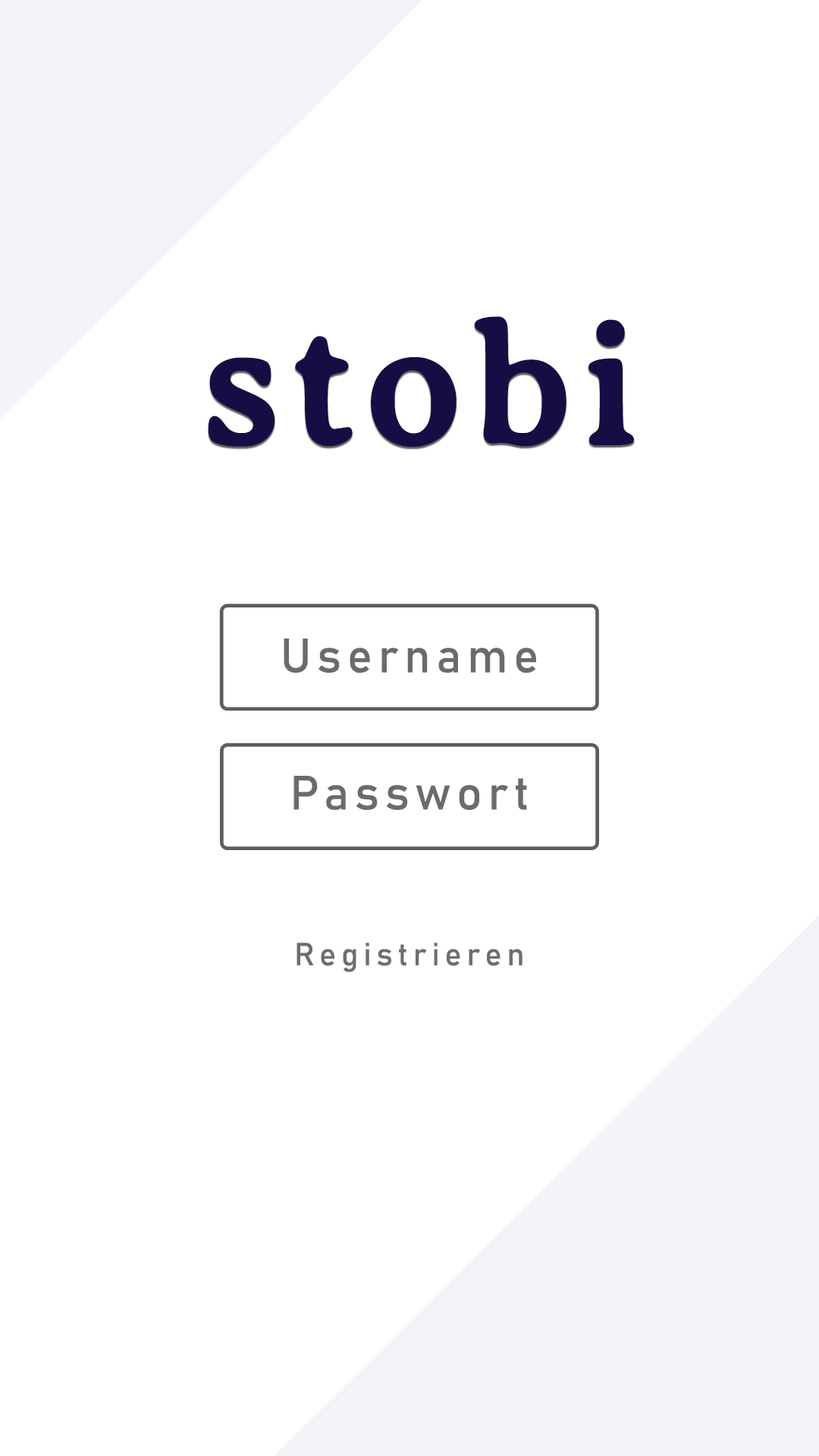
<style>
.page{position:relative;width:819px;height:1456px;background:#ffffff}
.page>*{position:absolute;margin:0}
.t1{font:173.8px "AveriaSerifLibre-Regular";letter-spacing:0.04em;color:#180c44;font-weight:bold}
.t2{font:47.4px "Bahnschrift";letter-spacing:0.12em;color:#6b6b6b;font-weight:bold}
.t3{font:31.6px "Bahnschrift";letter-spacing:0.16em;color:#6e6e6e;font-weight:bold}
</style>
<div class="page">
<p class="t1" style="left:208px;top:316px;width:426px;height:131px">stobi</p>
<p class="t2" style="left:284px;top:639px;width:252px;height:34px">Username</p>
<p class="t2" style="left:293px;top:776px;width:234px;height:34px">Passwort</p>
<p class="t3" style="left:297px;top:943px;width:225px;height:29px">Registrieren</p>
</div>
